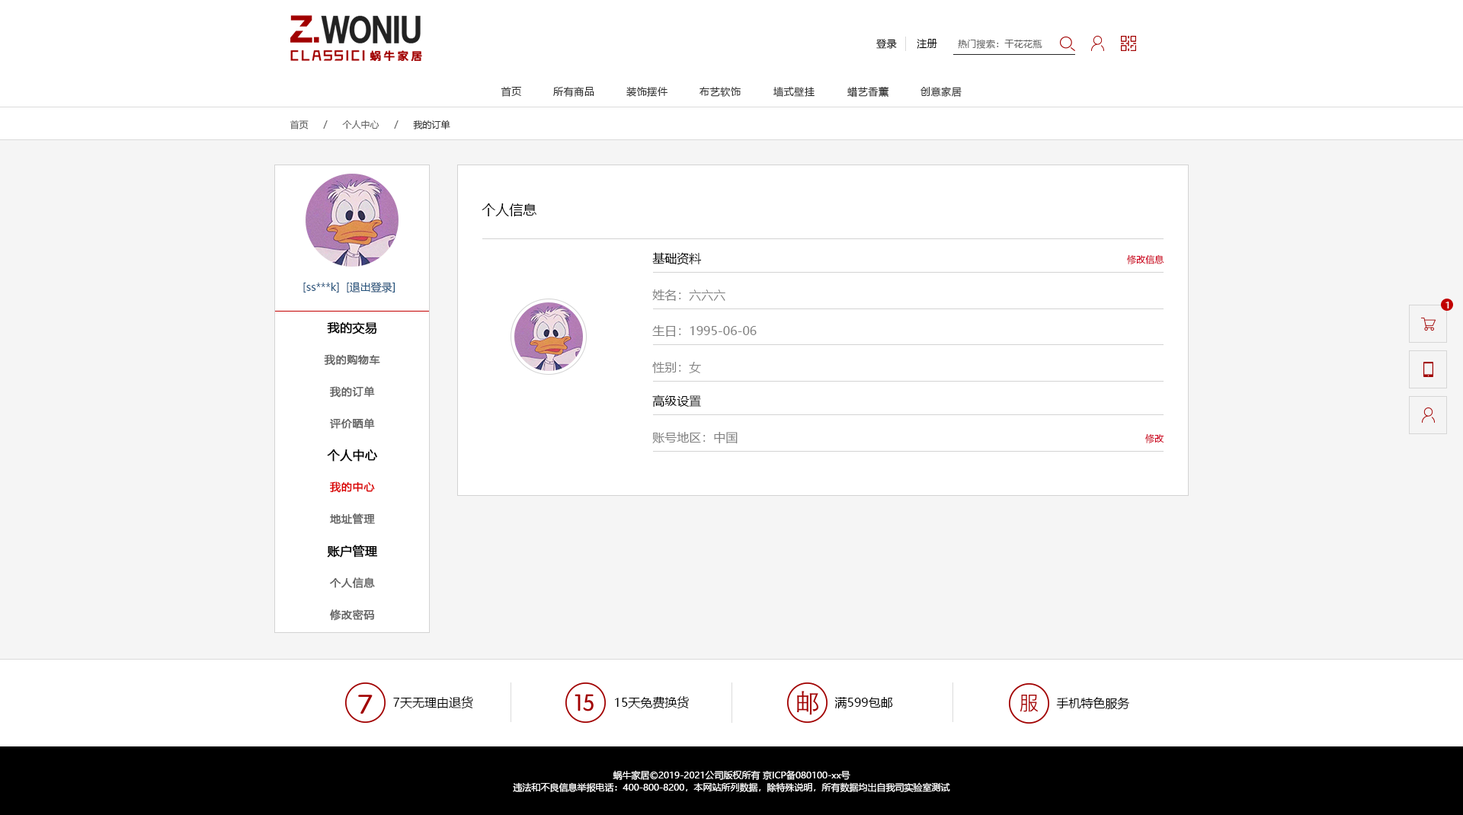
<style>
.page{position:relative;width:1463px;height:815px;background:#ffffff}
.page>*{position:absolute;margin:0}
.t1{font:9.9px "MicrosoftYaHei";letter-spacing:0.05em;color:#000000}
.t2{font:9.1px "MicrosoftYaHei";letter-spacing:0.025em;color:#686868}
.t3{font:9.9px "MicrosoftYaHei";letter-spacing:0.05em;color:#333333}
.t4{font:9.1px "MicrosoftYaHei";color:#666666}
.t5{font:9.1px "MicrosoftYaHei";color:#333333}
.t6{font:13.7px "MicrosoftYaHei";color:#000000}
.t7{font:12.2px "MicrosoftYaHei";color:#000000}
.t8{font:9.1px "MicrosoftYaHei";color:#ce001f}
.t9{font:10.7px "MicrosoftYaHei";color:#23527c}
.t10{font:12.2px "MicrosoftYaHei";color:#808080}
.t11{font:9.1px "MicrosoftYaHei";letter-spacing:0.025em;color:#ffffff}
.t12{font:12.2px "MicrosoftYaHei";color:#000000;font-weight:bold}
.t13{font:10.7px "MicrosoftYaHei";letter-spacing:0.025em;color:#626262;font-weight:bold}
.t14{font:10.7px "MicrosoftYaHei";letter-spacing:0.025em;color:#db0000;font-weight:bold}
.t15{font:9.1px/12.2px "MicrosoftYaHei";color:#ffffff}
</style>
<div class="page">
<p class="t1" style="left:876px;top:39px;width:21px;height:10px">登录</p>
<p class="t1" style="left:917px;top:39px;width:20px;height:10px">注册</p>
<p class="t2" style="left:958px;top:39px;width:84px;height:10px">热门搜索：干花花瓶</p>
<p class="t3" style="left:501px;top:87px;width:20px;height:10px">首页</p>
<p class="t3" style="left:553px;top:87px;width:41px;height:10px">所有商品</p>
<p class="t3" style="left:626px;top:87px;width:41px;height:10px">装饰摆件</p>
<p class="t3" style="left:699px;top:87px;width:42px;height:10px">布艺软饰</p>
<p class="t3" style="left:773px;top:87px;width:41px;height:10px">墙式壁挂</p>
<p class="t3" style="left:847px;top:86px;width:42px;height:12px">蜡艺香薰</p>
<p class="t3" style="left:920px;top:87px;width:41px;height:10px">创意家居</p>
<p class="t4" style="left:290px;top:120px;width:19px;height:10px">首页</p>
<p class="t4" style="left:323px;top:120px;width:5px;height:9px">/</p>
<p class="t4" style="left:342px;top:120px;width:37px;height:9px">个人中心</p>
<p class="t4" style="left:394px;top:120px;width:4px;height:9px">/</p>
<p class="t5" style="left:413px;top:120px;width:37px;height:10px">我的订单</p>
<p class="t6" style="left:481px;top:203px;width:55px;height:13px">个人信息</p>
<p class="t7" style="left:652px;top:252px;width:50px;height:13px">基础资料</p>
<p class="t8" style="left:1127px;top:254px;width:37px;height:10px">修改信息</p>
<p class="t9" style="left:347px;top:282px;width:48px;height:11px">[退出登录]</p>
<p class="t9" style="left:303px;top:283px;width:36px;height:10px">[ss***k]</p>
<p class="t10" style="left:652px;top:290px;width:73px;height:11px">姓名：六六六</p>
<p class="t11" style="left:1445px;top:302px;width:4px;height:7px">1</p>
<p class="t12" style="left:327px;top:322px;width:50px;height:12px">我的交易</p>
<p class="t10" style="left:652px;top:325px;width:105px;height:12px">生日：1995-06-06</p>
<p class="t13" style="left:324px;top:354px;width:56px;height:12px">我的购物车</p>
<p class="t10" style="left:652px;top:362px;width:49px;height:11px">性别：女</p>
<p class="t13" style="left:330px;top:386px;width:45px;height:12px">我的订单</p>
<p class="t7" style="left:652px;top:395px;width:49px;height:12px">高级设置</p>
<p class="t13" style="left:330px;top:418px;width:45px;height:11px">评价晒单</p>
<p class="t10" style="left:652px;top:432px;width:85px;height:12px">账号地区：中国</p>
<p class="t8" style="left:1145px;top:433px;width:19px;height:10px">修改</p>
<p class="t12" style="left:327px;top:449px;width:51px;height:13px">个人中心</p>
<p class="t14" style="left:330px;top:481px;width:45px;height:12px">我的中心</p>
<p class="t13" style="left:330px;top:513px;width:45px;height:12px">地址管理</p>
<p class="t12" style="left:327px;top:545px;width:51px;height:13px">账户管理</p>
<p class="t13" style="left:330px;top:577px;width:45px;height:12px">个人信息</p>
<p class="t13" style="left:330px;top:609px;width:45px;height:12px">修改密码</p>
<p class="t7" style="left:393px;top:696px;width:80px;height:13px">7天无理由退货</p>
<p class="t7" style="left:615px;top:696px;width:74px;height:13px">15天免费换货</p>
<p class="t7" style="left:834px;top:697px;width:59px;height:12px">满599包邮</p>
<p class="t7" style="left:1056px;top:697px;width:74px;height:13px">手机特色服务</p>
<p class="t15" style="left:513px;top:770px;width:437px;height:22px;text-align:center">蜗牛家居©2019-2021公司版权所有 京ICP备080100-xx号<br>违法和不良信息举报电话：400-800-8200，本网站所列数据，除特殊说明，所有数据均出自我司实验室测试</p>
</div>
